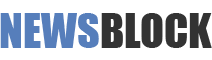
<style>
.page{position:relative;width:212px;height:60px;background:#ffffff}
.page>*{position:absolute;margin:0}
.t1{font:44px "Impact";color:#333333}
.t2{font:44px "Impact";color:#567ebb}
</style>
<div class="page">
<p class="t1" style="left:0px;top:13px;width:212px;height:35px"><span class="t2">NEWS</span>BLOCK</p>
</div>
